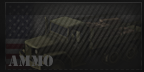
<style>
.page{position:relative;width:144px;height:72px}
.page>*{position:absolute;margin:0}
.t1{font:14px "StencilStd";color:#4c4c4c}
</style>
<div class="page">
<p class="t1" style="left:8px;top:55px;width:45px;height:12px">AMMO</p>
</div>
